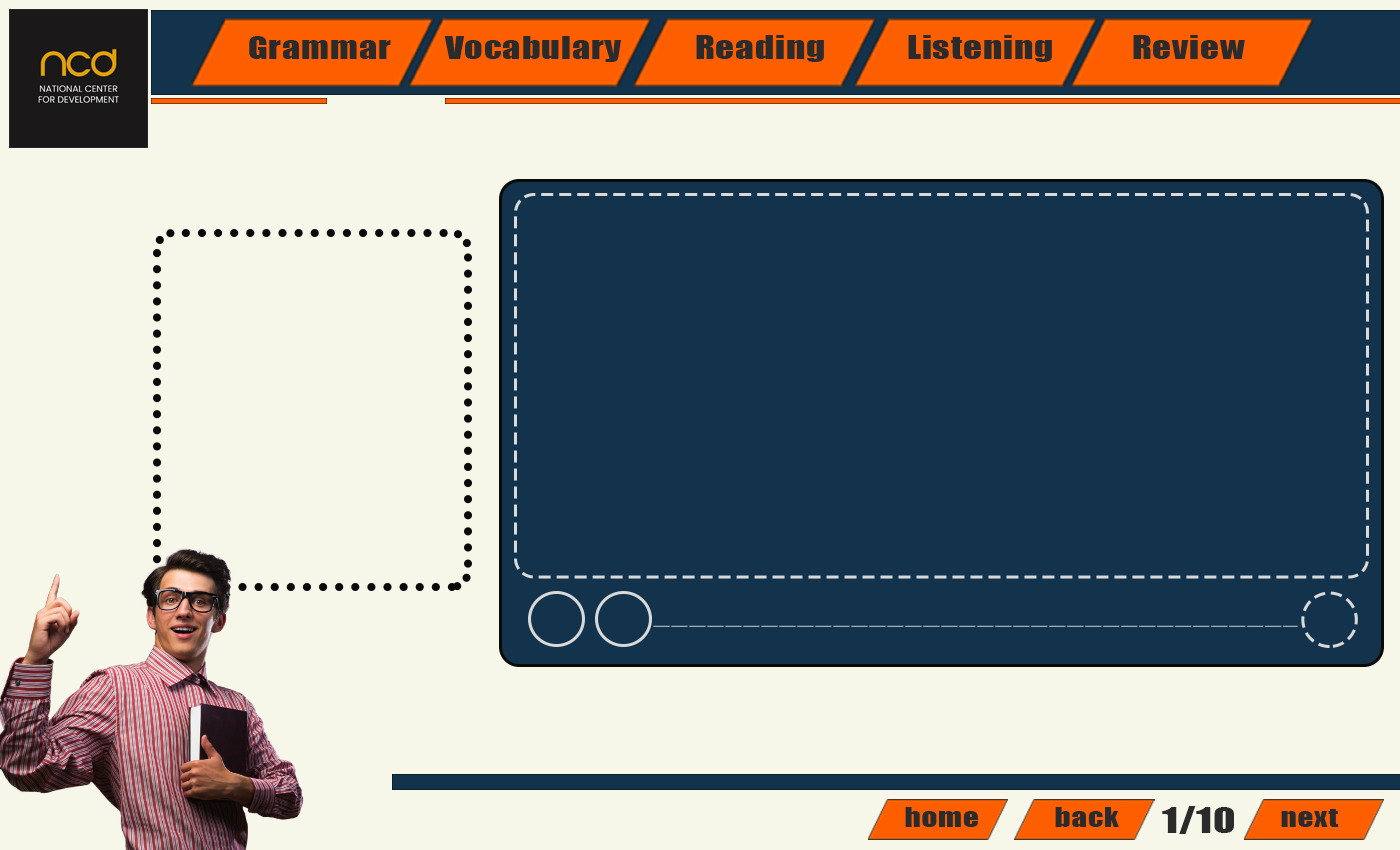
<style>
.page{position:relative;width:1400px;height:850px;background:#f6f6e9}
.page>*{position:absolute;margin:0}
.t1{font:29.2px "Impact";letter-spacing:0.02em;color:#2b2b2b;scale:1.25 1}
.t2{font:29.9px "Impact";letter-spacing:0.02em;color:#2b2b2b;scale:1.25 1}
.t3{font:25px "Impact";letter-spacing:0.02em;color:#2b2b2b;scale:1.25 1}
.t4{font:33.3px "Impact";letter-spacing:0.02em;color:#2b2b2b;scale:1.25 1}
</style>
<div class="page">
<p class="t1" style="left:249px;top:36px;width:142px;height:23px">Grammar</p>
<p class="t1" style="left:444px;top:36px;width:177px;height:26px">Vocabulary</p>
<p class="t2" style="left:696px;top:35px;width:128px;height:27px">Reading</p>
<p class="t2" style="left:908px;top:35px;width:144px;height:27px">Listening</p>
<p class="t2" style="left:1133px;top:35px;width:112px;height:24px">Review</p>
<p class="t3" style="left:905px;top:807px;width:73px;height:20px">home</p>
<p class="t3" style="left:1055px;top:807px;width:64px;height:20px">back</p>
<p class="t4" style="left:1162px;top:806px;width:72px;height:28px">1/10</p>
<p class="t3" style="left:1281px;top:809px;width:58px;height:18px">next</p>
</div>
